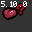
<style>
.page{position:relative;width:32px;height:32px;background:#333333}
.page>*{position:absolute;margin:0}
.t1{font:9px "Consolas";letter-spacing:-0.038em;color:#ffffff}
</style>
<div class="page">
<p class="t1" style="left:1px;top:1px;width:26px;height:6px">5.10.0</p>
</div>
